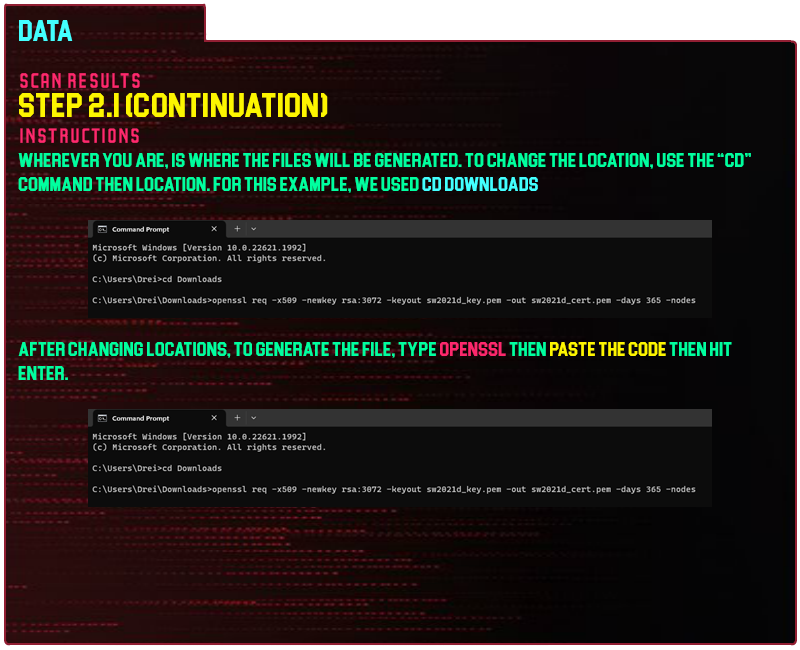
<style>
.page{position:relative;width:800px;height:650px}
.page>*{position:absolute;margin:0}
.t1{font:30px "Blockletter";color:#43ffff}
.t2{font:35px "Party-Lights-[WLM]-Flat";color:#ff296d}
.t3{font:35px "Blockletter";color:#fdf500}
.t4{font:20px "Blockletter";color:#00ff9f}
.t5{font:20px "Blockletter";color:#43ffff}
.t6{font:20px "Blockletter";color:#fd286c}
.t7{font:20px "Blockletter";color:#fdf500}
</style>
<div class="page">
<p class="t1" style="left:19px;top:20px;width:54px;height:21px">Data</p>
<p class="t2" style="left:20px;top:73px;width:120px;height:15px">Scan REsults</p>
<p class="t3" style="left:19px;top:93px;width:309px;height:24px">step 2.1 (continuation)</p>
<p class="t2" style="left:20px;top:128px;width:119px;height:15px">instructions</p>
<p class="t4" style="left:18px;top:153px;width:733px;height:40px">WHEREVER YOU ARE, IS WHERE THE FILES WILL BE GENERATED. tO CHANGE THE LOCATION, USE THE “CD” COMMAND THEN LOCATION. fOR THIS EXAMPLE, WE USED <span class="t5">CD DOWNLOADS</span></p>
<p class="t4" style="left:18px;top:342px;width:714px;height:38px">AFTER CHANGING LOCATIONS, TO GENERATE THE FILE, TYPE <span class="t6">OPENSSL</span> THEN <span class="t7">PASTE THE CODE</span> THEN HIT ENTER.</p>
</div>
